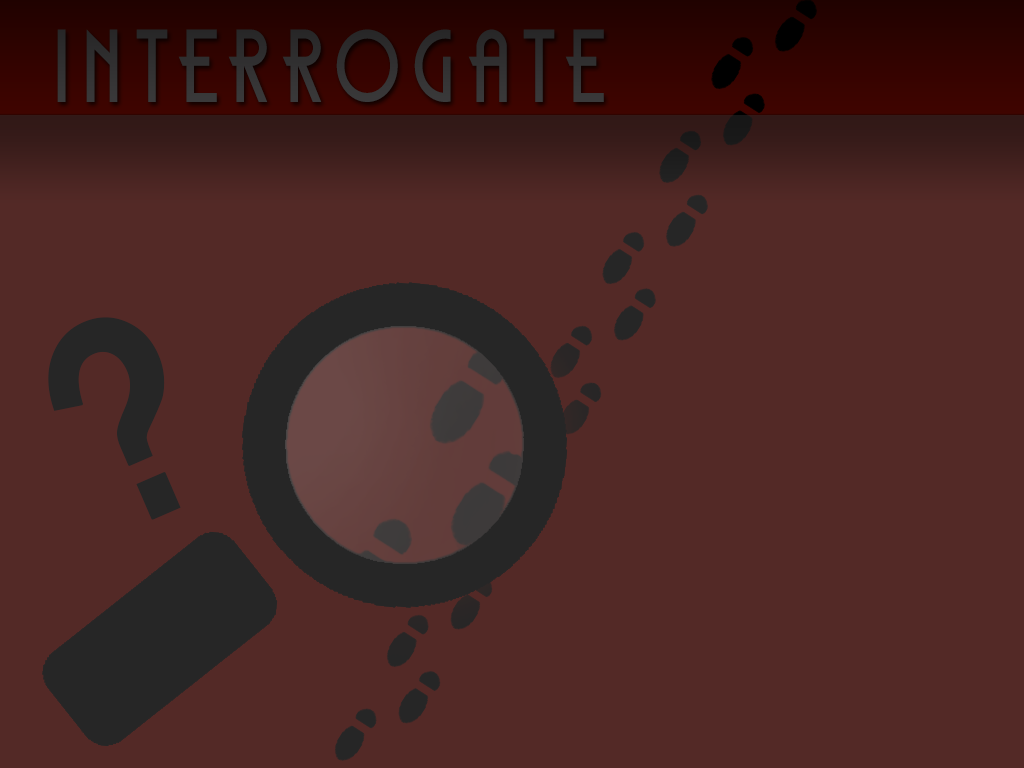
<style>
.page{position:relative;width:1024px;height:768px;background:#532926}
.page>*{position:absolute;margin:0}
.t1{font:90.6px "DKCarambola";letter-spacing:0.18em;color:#3d3c3d;scale:0.84 1}
.t2{font:305.9px "FranklinGothic-Medium";letter-spacing:0.18em;color:#262626;font-weight:bold;scale:0.84 1}
</style>
<div class="page">
<p class="t1" style="left:57px;top:29px;width:547px;height:73px">interrogate</p>
<p class="t2" style="left:48px;top:317px;width:133px;height:203px;rotate:-23deg">?</p>
</div>
